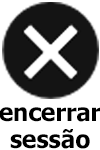
<style>
.page{position:relative;width:100px;height:150px;background:#ffffff}
.page>*{position:absolute;margin:0}
.t1{font:24px/26.9px "Tahoma-Bold";color:#000000}
</style>
<div class="page">
<p class="t1" style="left:0px;top:107px;width:101px;height:42px;text-align:center">encerrar<br>sessão</p>
</div>
